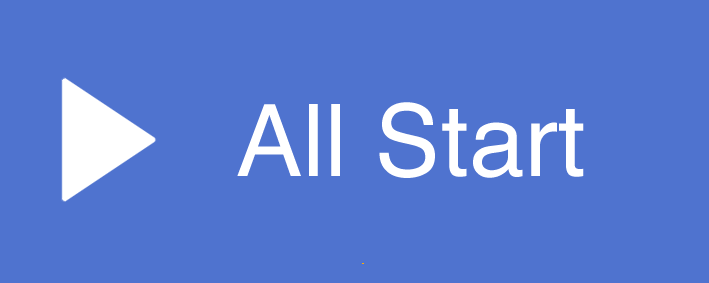
<style>
.page{position:relative;width:709px;height:283px;background:#4f73cf}
.page>*{position:absolute;margin:0}
.t1{font:100px "Helvetica";color:#ffffff}
</style>
<div class="page">
<p class="t1" style="left:237px;top:102px;width:347px;height:76px">All Start</p>
</div>
